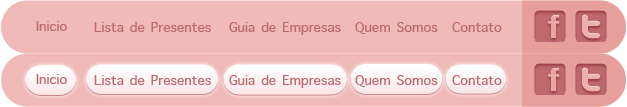
<style>
.page{position:relative;width:627px;height:107px;background:#efbab7}
.page>*{position:absolute;margin:0}
.t1{font:18px "AppleSymbols";color:#be696e}
</style>
<div class="page">
<p class="t1" style="left:36px;top:21px;width:31px;height:10px">Inicio</p>
<p class="t1" style="left:94px;top:22px;width:117px;height:10px">Lista de Presentes</p>
<p class="t1" style="left:229px;top:22px;width:112px;height:13px">Guia de Empresas</p>
<p class="t1" style="left:355px;top:22px;width:83px;height:12px">Quem Somos</p>
<p class="t1" style="left:452px;top:22px;width:50px;height:10px">Contato</p>
<p class="t1" style="left:36px;top:74px;width:31px;height:10px">Inicio</p>
<p class="t1" style="left:94px;top:75px;width:117px;height:10px">Lista de Presentes</p>
<p class="t1" style="left:229px;top:75px;width:112px;height:13px">Guia de Empresas</p>
<p class="t1" style="left:355px;top:75px;width:83px;height:12px">Quem Somos</p>
<p class="t1" style="left:452px;top:75px;width:50px;height:10px">Contato</p>
</div>
